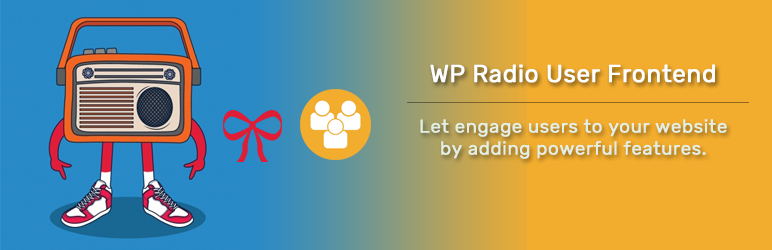
<style>
.page{position:relative;width:772px;height:250px;background:#f3ad2e}
.page>*{position:absolute;margin:0}
.t1{font:24.5px "Rubik-Regular";letter-spacing:0.01em;color:#fefffe;font-weight:bold}
.t2{font:18.5px "Rubik-Regular";letter-spacing:0.01em;color:#e4efe4;font-weight:bold}
</style>
<div class="page">
<p class="t1" style="left:430px;top:64px;width:285px;height:19px">WP Radio User Frontend</p>
<p class="t2" style="left:420px;top:119px;width:307px;height:40px;text-align:center">Let engage users to your website by adding powerful features.</p>
</div>
